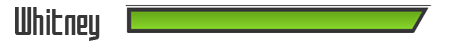
<style>
.page{position:relative;width:457px;height:44px;background:#ffffff}
.page>*{position:absolute;margin:0}
.t1{font:35px "SAOUITT-Regular";color:#373737}
</style>
<div class="page">
<p class="t1" style="left:15px;top:7px;width:85px;height:34px">Whitney</p>
</div>
